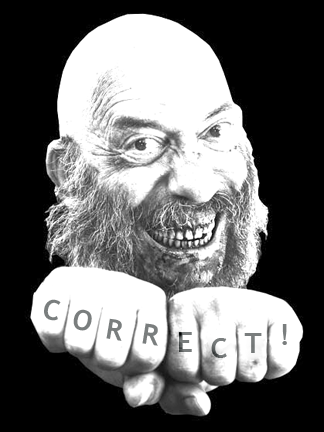
<style>
.page{position:relative;width:324px;height:432px;background:#000000}
.page>*{position:absolute;margin:0}
.t1{font:28px "TrebuchetMS-Bold";color:#858181}
.t2{font:28px "TrebuchetMS-Bold"}
.t3{font:28px "TrebuchetMS-Bold";color:#707474}
</style>
<div class="page">
<p class="t1" style="left:44px;top:299px;width:17px;height:22px;rotate:11deg">C</p>
<p class="t1" style="left:73px;top:309px;width:19px;height:22px;rotate:12deg">O</p>
<p class="t1" style="left:106px;top:318px;width:16px;height:23px;rotate:10deg">R</p>
<p class="t1" style="left:142px;top:323px;width:16px;height:23px;rotate:9deg">R</p>
<p class="t1" style="left:282px;top:324px;width:5px;height:21px">!</p>
<p class="t2" style="left:179px;top:332px;width:13px;height:20px">E</p>
<p class="t3" style="left:211px;top:338px;width:16px;height:20px">C</p>
<p class="t1" style="left:244px;top:333px;width:18px;height:20px">T</p>
</div>
